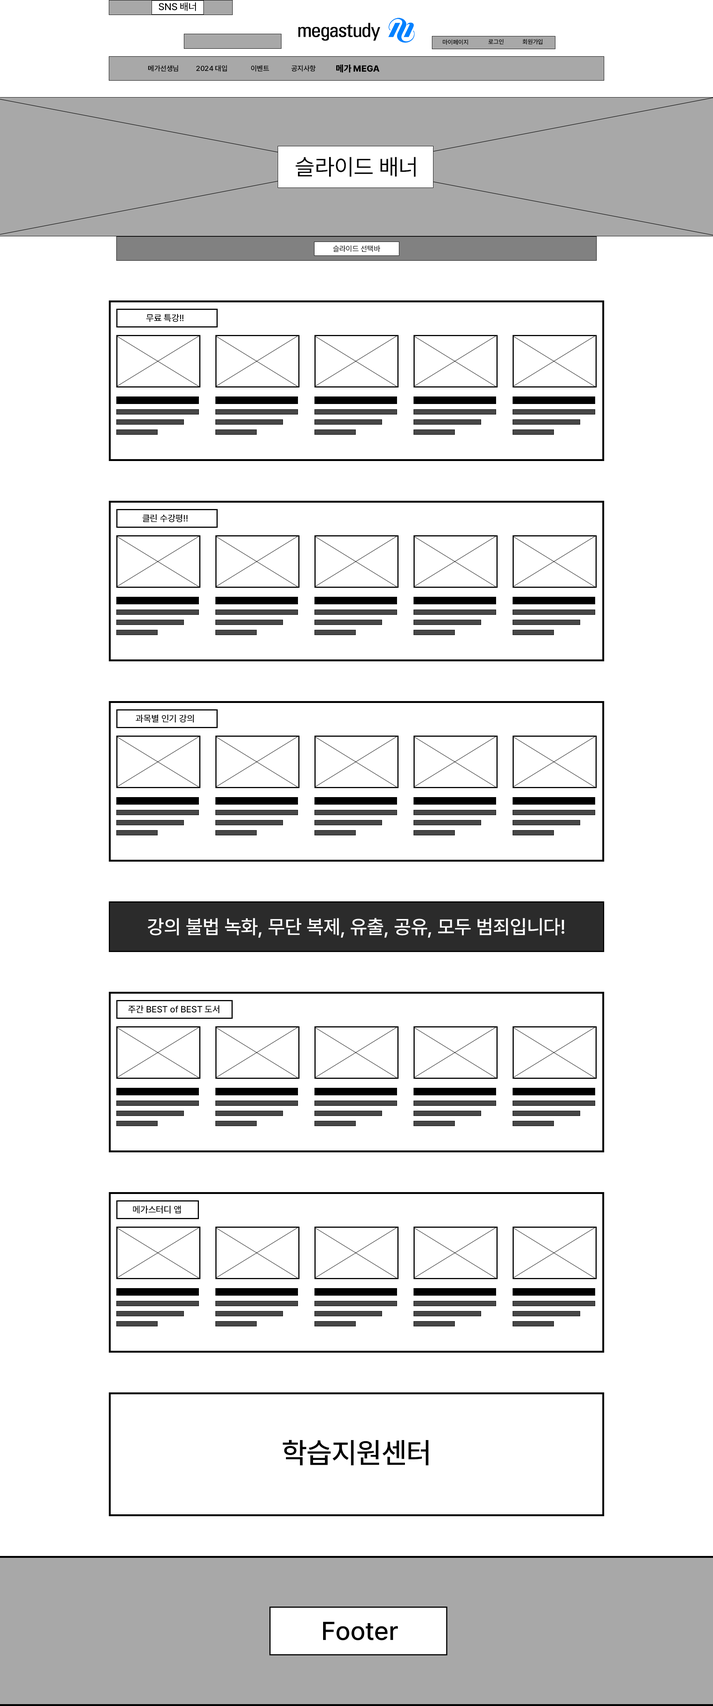
<style>
.page{position:relative;width:713px;height:1706px;background:#ffffff}
.page>*{position:absolute;margin:0}
.t1{font:9.9px "Pretendard-Medium";color:#000000}
.t2{font:6px "Pretendard-Medium";color:#000000}
.t3{font:7.1px "Pretendard-Medium";color:#000000}
.t4{font:8.9px "Pretendard-ExtraBold";color:#000000}
.t5{font:22.6px "Pretendard-Regular";color:#000000}
.t6{font:7.5px "Pretendard-Regular";color:#000000}
.t7{font:9px "Pretendard-Medium";color:#000000}
.t8{font:19.5px "Pretendard-Medium";color:#ffffff}
.t9{font:28.9px "Pretendard-Medium";color:#000000}
.t10{font:25.7px "Pretendard-Medium";color:#000000}
</style>
<div class="page">
<p class="t1" style="left:159px;top:2px;width:37px;height:9px">SNS 배너</p>
<p class="t2" style="left:443px;top:39px;width:25px;height:6px">마이페이지</p>
<p class="t2" style="left:488px;top:39px;width:15px;height:5px">로그인</p>
<p class="t2" style="left:522px;top:39px;width:20px;height:6px">회원가입</p>
<p class="t3" style="left:148px;top:65px;width:30px;height:7px">메가선생님</p>
<p class="t3" style="left:196px;top:65px;width:31px;height:7px">2024 대입</p>
<p class="t3" style="left:251px;top:65px;width:18px;height:7px">이벤트</p>
<p class="t3" style="left:291px;top:65px;width:25px;height:7px">공지사항</p>
<p class="t4" style="left:336px;top:65px;width:43px;height:8px">메가 MEGA</p>
<p class="t5" style="left:296px;top:157px;width:120px;height:20px">슬라이드 배너</p>
<p class="t6" style="left:333px;top:245px;width:47px;height:7px">슬라이드 선택바</p>
<p class="t7" style="left:146px;top:314px;width:37px;height:8px">무료 특강!!</p>
<p class="t7" style="left:142px;top:514px;width:46px;height:8px">클린 수강평!!</p>
<p class="t7" style="left:135px;top:714px;width:59px;height:8px">과목별 인기 강의</p>
<p class="t8" style="left:147px;top:918px;width:417px;height:20px">강의 불법 녹화, 무단 복제, 유출, 공유, 모두 범죄입니다!</p>
<p class="t7" style="left:128px;top:1005px;width:91px;height:8px">주간 BEST of BEST 도서</p>
<p class="t7" style="left:133px;top:1205px;width:48px;height:8px">메가스터디 앱</p>
<p class="t9" style="left:282px;top:1439px;width:146px;height:26px">학습지원센터</p>
<p class="t10" style="left:323px;top:1621px;width:75px;height:19px">Footer</p>
</div>
